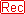
<style>
.page{position:relative;width:25px;height:14px;background:#ffffff}
.page>*{position:absolute;margin:0}
.t1{font:13px "ArialMT";color:#df0000}
</style>
<div class="page">
<p class="t1" style="left:1px;top:1px;width:23px;height:15px">Rec</p>
</div>
